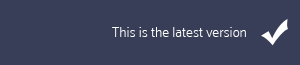
<style>
.page{position:relative;width:300px;height:65px;background:#383e57}
.page>*{position:absolute;margin:0}
.t1{font:14px "Palanquin-Thin";color:#ffffff}
</style>
<div class="page">
<p class="t1" style="left:112px;top:27px;width:134px;height:10px">This is the latest version</p>
</div>
